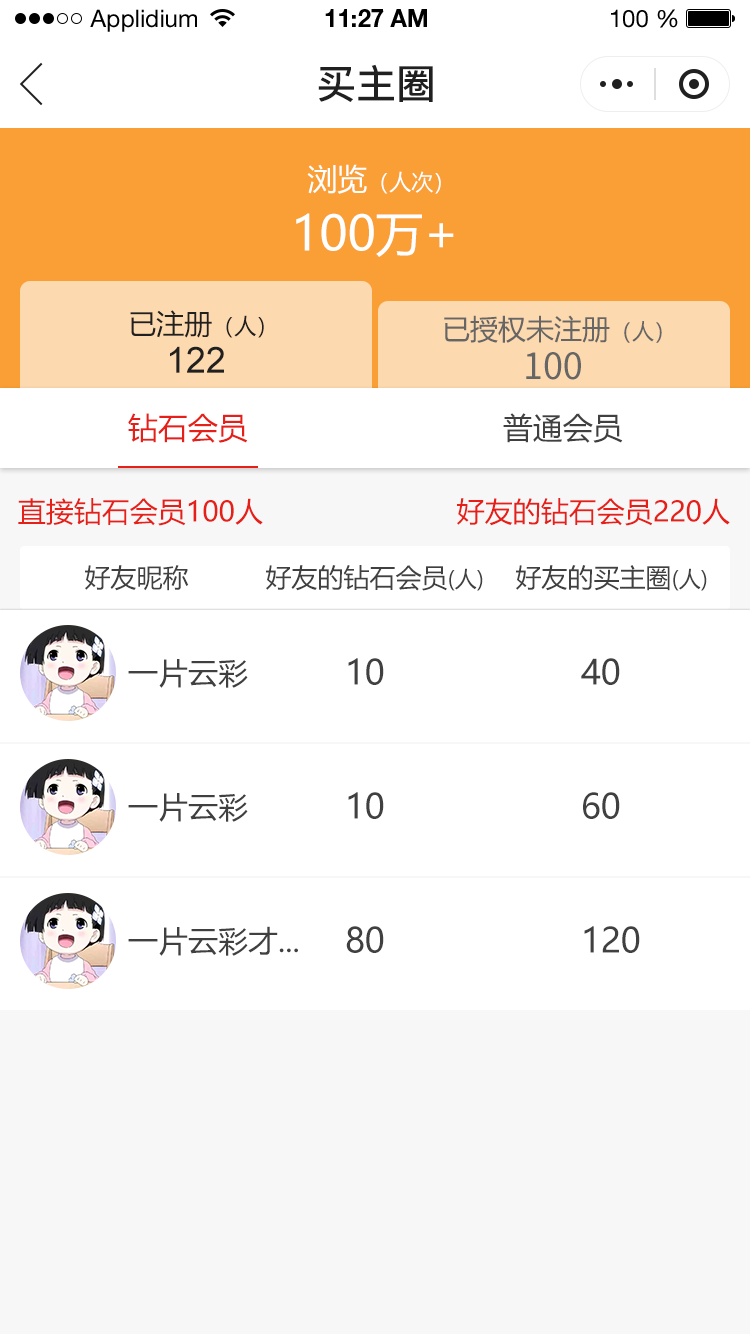
<style>
.page{position:relative;width:750px;height:1334px;background:#ffffff}
.page>*{position:absolute;margin:0}
.t1{font:24px "HelveticaNeueLTStd-Roman";color:#000000}
.t2{font:24px "HelveticaNeueLTStd-Bd";color:#000000}
.t3{font:40px "PingFang-SC-Bold";color:#202020;text-transform:uppercase}
.t4{font:22px "MicrosoftYaHei";color:#ffffff;text-transform:uppercase}
.t5{font:30px "MicrosoftYaHei";color:#ffffff;text-transform:uppercase}
.t6{font:48px "MicrosoftYaHei";color:#ffffff;text-transform:uppercase}
.t7{font:28px "MicrosoftYaHei";color:#202020;text-transform:uppercase}
.t8{font:22px "MicrosoftYaHei";color:#202020;text-transform:uppercase}
.t9{font:28.1px "MicrosoftYaHei";color:#666666;text-transform:uppercase}
.t10{font:22.1px "MicrosoftYaHei";color:#666666;text-transform:uppercase}
.t11{font:36px "ArialMT";color:#202020;text-transform:uppercase}
.t12{font:36.1px "SourceHanSansCN-Regular";color:#666666;text-transform:uppercase}
.t13{font:30px "MicrosoftYaHei";color:#e61f18;text-transform:uppercase}
.t14{font:30px "MicrosoftYaHei";color:#404040;text-transform:uppercase}
.t15{font:28px "MicrosoftYaHei";color:#e61f18;text-transform:uppercase}
.t16{font:26px "MicrosoftYaHei";color:#404040;text-transform:uppercase}
.t17{font:22px "MicrosoftYaHei";color:#404040;text-transform:uppercase}
.t18{font:34px "MicrosoftYaHei";color:#404040;text-transform:uppercase}
</style>
<div class="page">
<p class="t1" style="left:90px;top:9px;width:107px;height:23px">Applidium</p>
<p class="t2" style="left:325px;top:9px;width:102px;height:18px">11:27 AM</p>
<p class="t1" style="left:611px;top:9px;width:67px;height:19px">100 %</p>
<p class="t3" style="left:318px;top:64px;width:115px;height:38px">买主圈</p>
<p class="t4" style="left:307px;top:164px;width:134px;height:30px"><span class="t5">浏览</span>（人次）</p>
<p class="t6" style="left:296px;top:213px;width:158px;height:44px">100万+</p>
<p class="t7" style="left:130px;top:310px;width:134px;height:28px">已注册<span class="t8">（人）</span></p>
<p class="t9" style="left:444px;top:315px;width:218px;height:28px">已授权未注册<span class="t10">（人）</span></p>
<p class="t11" style="left:170px;top:346px;width:54px;height:27px">122</p>
<p class="t12" style="left:526px;top:352px;width:55px;height:28px">100</p>
<p class="t13" style="left:128px;top:413px;width:120px;height:30px">钻石会员</p>
<p class="t14" style="left:503px;top:413px;width:120px;height:30px">普通会员</p>
<p class="t15" style="left:18px;top:498px;width:245px;height:28px">直接钻石会员100人</p>
<p class="t15" style="left:457px;top:498px;width:273px;height:28px">好友的钻石会员220人</p>
<p class="t16" style="left:85px;top:565px;width:104px;height:26px">好友昵称</p>
<p class="t16" style="left:266px;top:565px;width:217px;height:26px">好友的钻石会员<span class="t17">(人)</span></p>
<p class="t16" style="left:516px;top:565px;width:191px;height:26px">好友的买主圈<span class="t17">(人)</span></p>
<p class="t14" style="left:128px;top:659px;width:120px;height:29px">一片云彩</p>
<p class="t18" style="left:348px;top:658px;width:36px;height:27px">10</p>
<p class="t18" style="left:581px;top:658px;width:39px;height:27px">40</p>
<p class="t14" style="left:128px;top:793px;width:120px;height:29px">一片云彩</p>
<p class="t18" style="left:348px;top:792px;width:36px;height:27px">10</p>
<p class="t18" style="left:583px;top:792px;width:37px;height:27px">60</p>
<p class="t14" style="left:128px;top:926px;width:170px;height:30px">一片云彩才...</p>
<p class="t18" style="left:346px;top:926px;width:38px;height:27px">80</p>
<p class="t18" style="left:584px;top:926px;width:56px;height:27px">120</p>
</div>
